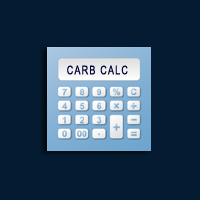
<style>
.page{position:relative;width:200px;height:200px;background:#051b31}
.page>*{position:absolute;margin:0}
.t1{font:12px "ArialMT";letter-spacing:0.1em;color:#000033;scale:0.75 1}
</style>
<div class="page">
<p class="t1" style="left:67px;top:65px;width:61px;height:10px">CARB CALC</p>
</div>
